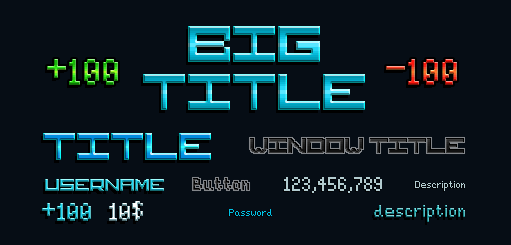
<style>
.page{position:relative;width:511px;height:245px;background:#060d15}
.page>*{position:absolute;margin:0}
.t1{font:48px/48px "Viper"}
.t2{font:30px "untitled-regular"}
.t3{font:36px "Viper"}
.t4{font:20px "Viper"}
.t5{font:16px "Viper"}
.t6{font:14px "untitled-regular"}
.t7{font:16px "untitled-regular";color:#b2cbcf}
.t8{font:8px "untitled-regular";color:#b2cbcf}
.t9{font:20px "untitled-regular"}
.t10{font:8px "untitled-regular";color:#00c2e5}
</style>
<div class="page">
<p class="t1" style="left:143px;top:26px;width:222px;height:84px;text-align:justify">BIG <br>     TITLE</p>
<p class="t2" style="left:47px;top:59px;width:71px;height:26px">+100</p>
<p class="t2" style="left:386px;top:59px;width:71px;height:26px">-100</p>
<p class="t3" style="left:43px;top:133px;width:168px;height:27px">TITLE</p>
<p class="t4" style="left:250px;top:138px;width:214px;height:15px">WINDOW TITLE</p>
<p class="t5" style="left:45px;top:179px;width:119px;height:12px">USERNAME</p>
<p class="t6" style="left:193px;top:178px;width:56px;height:12px">Button</p>
<p class="t7" style="left:284px;top:177px;width:98px;height:16px">123,456,789</p>
<p class="t8" style="left:415px;top:181px;width:50px;height:10px">Description</p>
<p class="t9" style="left:42px;top:203px;width:49px;height:18px">+100</p>
<p class="t9" style="left:109px;top:201px;width:34px;height:20px">10$</p>
<p class="t10" style="left:229px;top:209px;width:43px;height:7px">Password</p>
<p class="t6" style="left:374px;top:205px;width:91px;height:17px">description</p>
</div>
